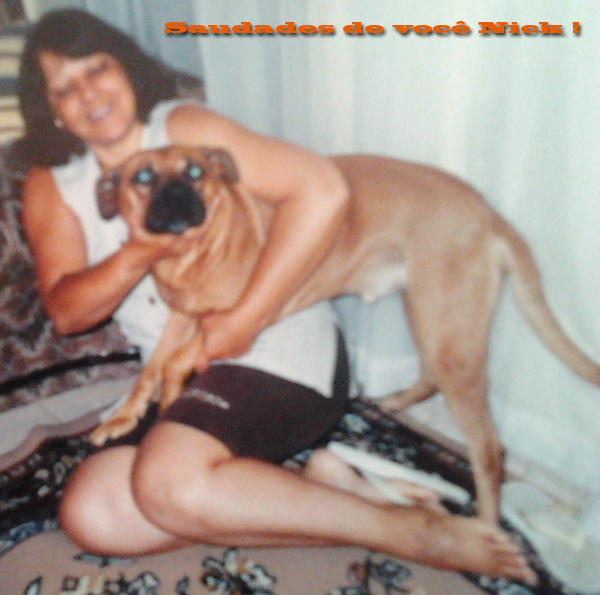
<style>
.page{position:relative;width:600px;height:595px}
.page>*{position:absolute;margin:0}
.t1{font:15px "BlackoakStd";color:#e85c06}
</style>
<div class="page">
<p class="t1" style="left:164px;top:21px;width:415px;height:12px">Saudades de você Nick !</p>
</div>
